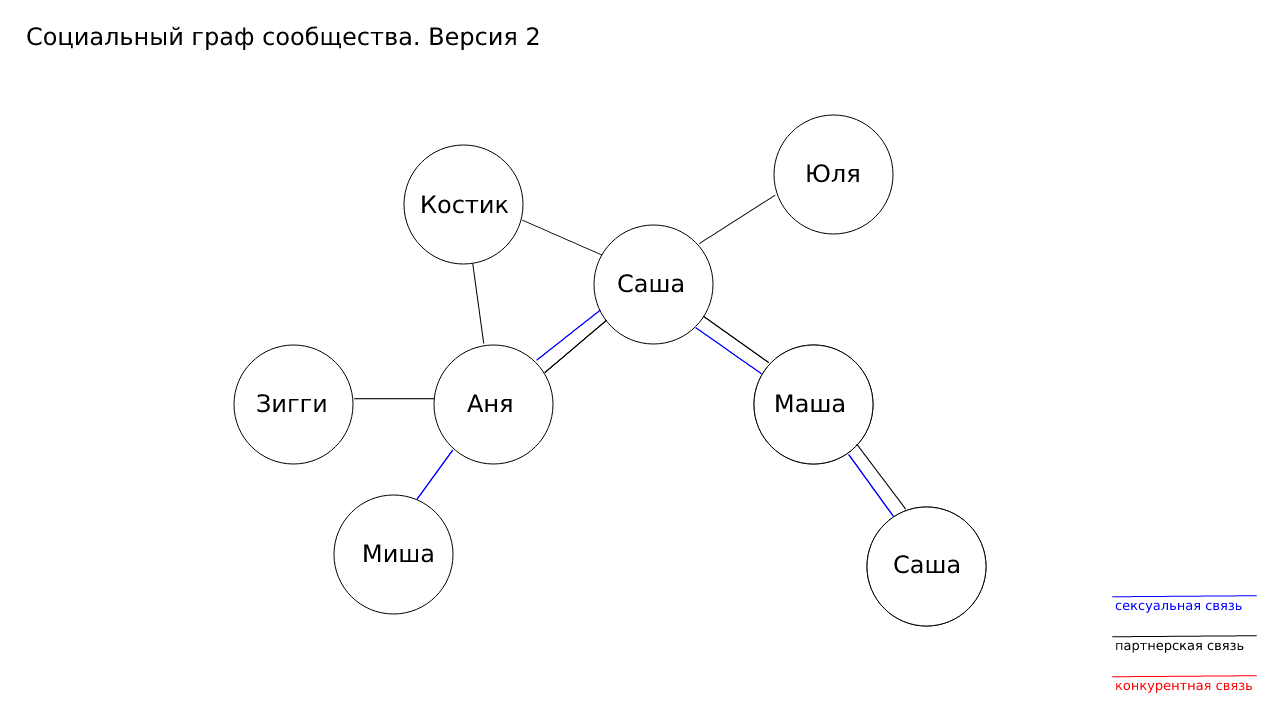
<style>
.page{position:relative;width:1280px;height:720px;background:#ffffff}
.page>*{position:absolute;margin:0}
.t1{font:24px "DejaVuSans";color:#000000}
.t2{font:13px "DejaVuSans";color:#0000ff}
.t3{font:13px "DejaVuSans";color:#000000}
.t4{font:13px "DejaVuSans";color:#ff0000}
</style>
<div class="page">
<p class="t1" style="left:27px;top:26px;width:512px;height:24px">Социальный граф сообщества. Версия 2</p>
<p class="t1" style="left:807px;top:164px;width:52px;height:19px">Юля</p>
<p class="t1" style="left:422px;top:195px;width:87px;height:19px">Костик</p>
<p class="t1" style="left:618px;top:274px;width:65px;height:19px">Саша</p>
<p class="t1" style="left:257px;top:394px;width:69px;height:19px">Зигги</p>
<p class="t1" style="left:467px;top:394px;width:45px;height:18px">Аня</p>
<p class="t1" style="left:776px;top:394px;width:68px;height:19px">Маша</p>
<p class="t1" style="left:364px;top:544px;width:69px;height:19px">Миша</p>
<p class="t1" style="left:894px;top:555px;width:65px;height:19px">Саша</p>
<p class="t2" style="left:1115px;top:602px;width:127px;height:11px">сексуальная связь</p>
<p class="t3" style="left:1116px;top:642px;width:128px;height:11px">партнерская связь</p>
<p class="t4" style="left:1116px;top:682px;width:137px;height:11px">конкурентная связь</p>
</div>
